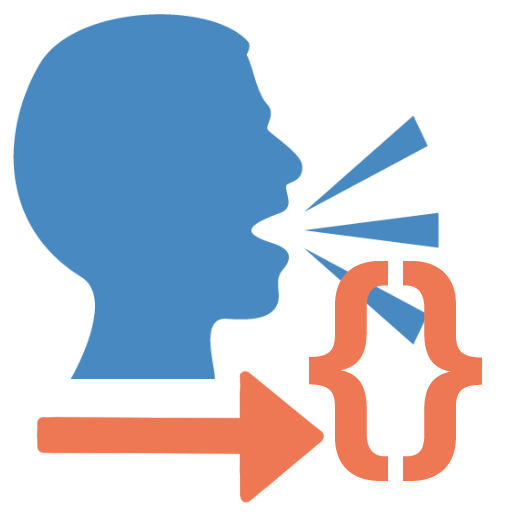
<style>
.page{position:relative;width:512px;height:512px;background:#ffffff}
.page>*{position:absolute;margin:0}
.t1{font:243px "AcuminConcept-Bold";color:#ee7854}
</style>
<div class="page">
<p class="t1" style="left:309px;top:261px;width:173px;height:220px">{}</p>
</div>
